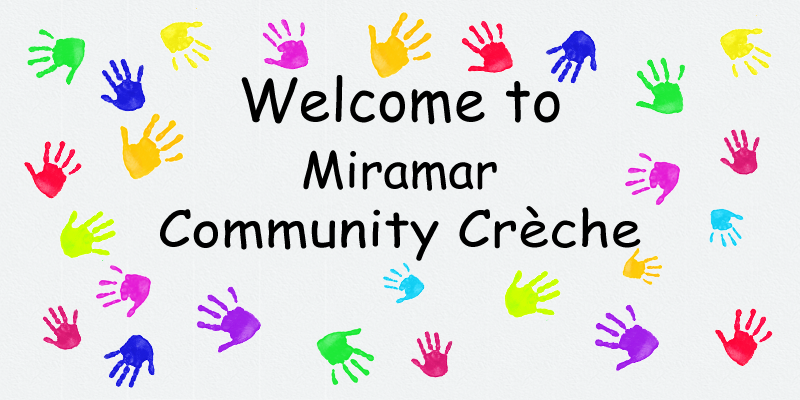
<style>
.page{position:relative;width:800px;height:400px}
.page>*{position:absolute;margin:0}
.t1{font:58.3px "ComicSansMS";letter-spacing:0.005em;color:#000000}
.t2{font:50px "ComicSansMS";letter-spacing:0.005em;color:#000000}
.t3{font:50px "ComicSansMS";letter-spacing:0.005em;color:#000000;scale:1.12 1}
</style>
<div class="page">
<p class="t1" style="left:241px;top:75px;width:319px;height:50px">Welcome to</p>
<p class="t2" style="left:303px;top:150px;width:194px;height:41px">Miramar</p>
<p class="t3" style="left:160px;top:206px;width:481px;height:55px">Community Crèche</p>
</div>
